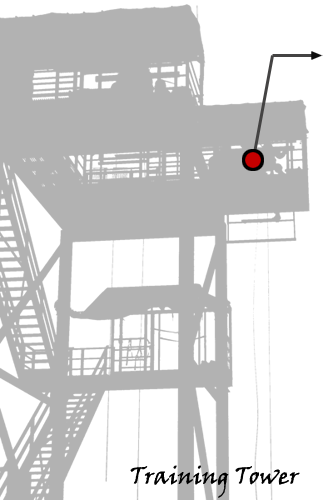
<style>
.page{position:relative;width:323px;height:500px;background:#b2b2b2}
.page>*{position:absolute;margin:0}
.t1{font:24px "VinerHandITC";color:#000000}
</style>
<div class="page">
<p class="t1" style="left:130px;top:465px;width:170px;height:33px">Training Tower</p>
</div>
